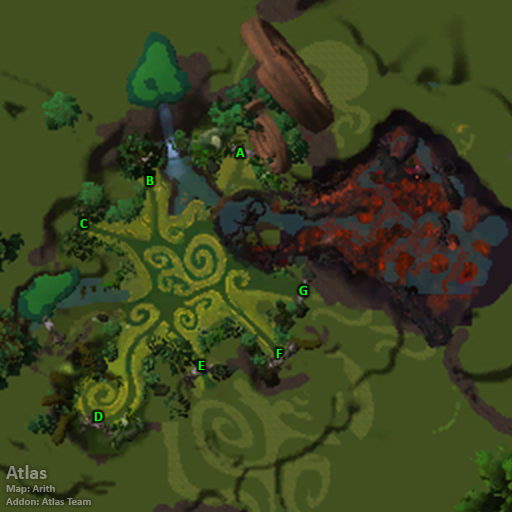
<style>
.page{position:relative;width:512px;height:512px;background:#424f1e}
.page>*{position:absolute;margin:0}
.t1{font:14px "Calibri-Bold";color:#00ff00}
.t2{font:11px "Calibri-Bold";color:#8c927d}
.t3{font:20px "Calibri-Bold";color:#8c927d}
</style>
<div class="page">
<p class="t1" style="left:236px;top:148px;width:9px;height:9px">A</p>
<p class="t1" style="left:146px;top:176px;width:8px;height:9px">B</p>
<p class="t1" style="left:80px;top:219px;width:8px;height:9px">C</p>
<p class="t1" style="left:299px;top:286px;width:9px;height:9px">G</p>
<p class="t1" style="left:276px;top:349px;width:6px;height:9px">F</p>
<p class="t1" style="left:198px;top:361px;width:7px;height:9px">E</p>
<p class="t1" style="left:94px;top:412px;width:9px;height:9px">D</p>
<p class="t2" style="left:6px;top:465px;width:85px;height:40px"><span class="t3">Atlas<br></span>Map: Arith<br>Addon: Atlas Team</p>
</div>
